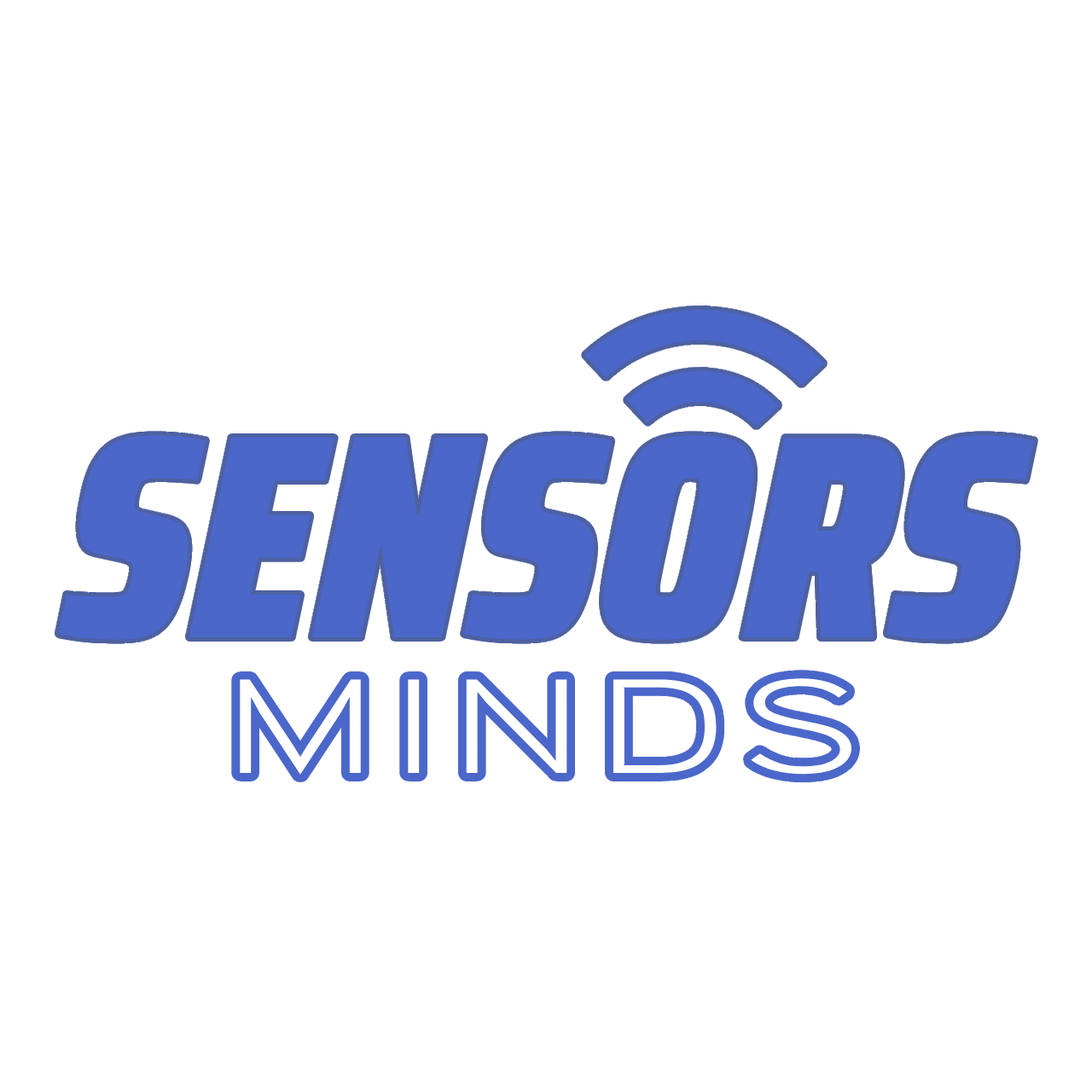
<style>
.page{position:relative;width:1092px;height:1092px;background:#ffffff}
.page>*{position:absolute;margin:0}
.t1{font:290.3px "SairaCondensed-BlackItalic";color:#4b67ca}
.t2{font:115.2px "SinkinSans-300Light";letter-spacing:0.16em;color:#ffffff;scale:1.36 1}
</style>
<div class="page">
<p class="t1" style="left:58px;top:435px;width:976px;height:205px">SENSORS</p>
<p class="t2" style="left:240px;top:678px;width:612px;height:97px">MINDS</p>
</div>
